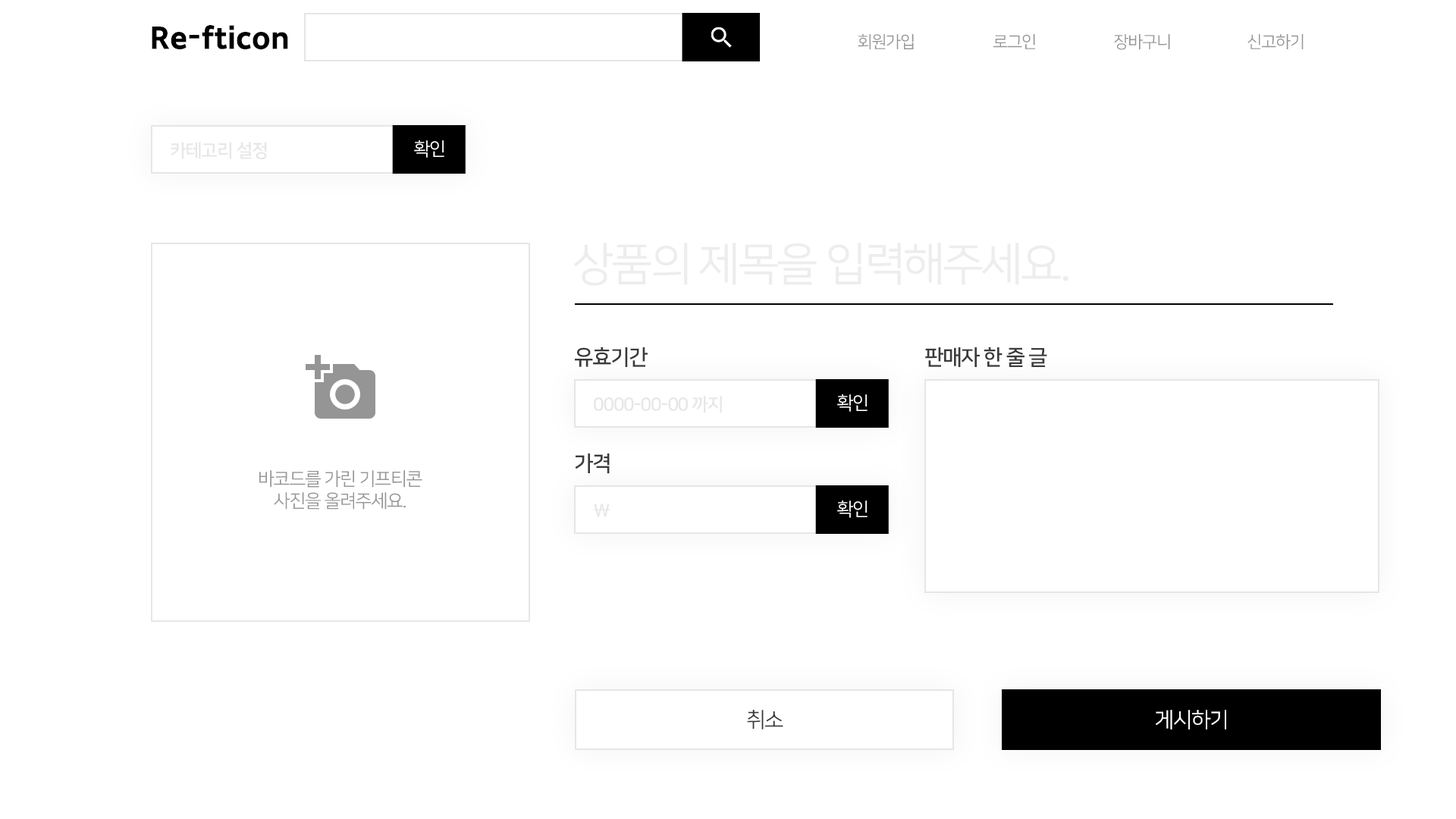
<style>
.page{position:relative;width:1456px;height:819px;background:#ffffff}
.page>*{position:absolute;margin:0}
.t1{font:30.3px "SDGothicNeoc-gExBd";color:#000000}
.t2{font:16.7px "NanumSquareOTFR";letter-spacing:-0.05em;color:#959595}
.t3{font:18.2px "NanumSquareOTFB";letter-spacing:-0.05em;color:#e6e6e6}
.t4{font:18.2px "NanumSquareOTFR";letter-spacing:-0.05em;color:#ffffff}
.t5{font:45.5px "NanumSquareOTFR";letter-spacing:-0.05em;color:#ededed}
.t6{font:21.2px "NanumSquareOTFB";letter-spacing:-0.05em;color:#3b3b3b}
.t7{font:18.2px "NanumSquareOTFR";letter-spacing:-0.05em;color:#959595}
.t8{font:21.2px "NanumSquareOTFR";letter-spacing:-0.05em;color:#353535}
.t9{font:21.2px "NanumSquareOTFR";letter-spacing:-0.05em;color:#ffffff}
</style>
<div class="page">
<p class="t1" style="left:152px;top:25px;width:136px;height:25px">Re-fticon</p>
<p class="t2" style="left:858px;top:33px;width:56px;height:16px">회원가입</p>
<p class="t2" style="left:993px;top:34px;width:42px;height:15px">로그인</p>
<p class="t2" style="left:1114px;top:34px;width:56px;height:16px">장바구니</p>
<p class="t2" style="left:1247px;top:34px;width:57px;height:15px">신고하기</p>
<p class="t3" style="left:171px;top:142px;width:96px;height:17px">카테고리 설정</p>
<p class="t4" style="left:414px;top:140px;width:30px;height:18px">확인</p>
<p class="t5" style="left:573px;top:243px;width:495px;height:43px">상품의 제목을 입력해주세요.</p>
<p class="t6" style="left:575px;top:347px;width:73px;height:20px">유효기간</p>
<p class="t6" style="left:925px;top:347px;width:122px;height:20px">판매자 한 줄 글</p>
<p class="t3" style="left:594px;top:396px;width:128px;height:17px">0000-00-00 까지</p>
<p class="t4" style="left:837px;top:394px;width:31px;height:18px">확인</p>
<p class="t6" style="left:575px;top:453px;width:35px;height:21px">가격</p>
<p class="t7" style="left:259px;top:470px;width:163px;height:40px;text-align:center">바코드를 가린 기프티콘<br>사진을 올려주세요.</p>
<p class="t3" style="left:593px;top:504px;width:17px;height:13px">\</p>
<p class="t4" style="left:837px;top:500px;width:31px;height:18px">확인</p>
<p class="t8" style="left:747px;top:710px;width:36px;height:20px">취소</p>
<p class="t9" style="left:1156px;top:710px;width:70px;height:20px">게시하기</p>
</div>
